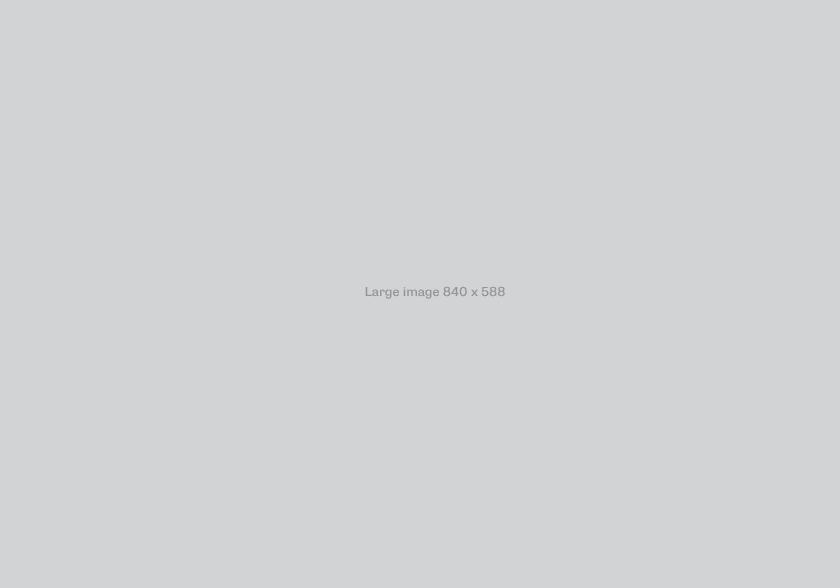
<style>
.page{position:relative;width:840px;height:588px;background:#d2d3d5}
.page>*{position:absolute;margin:0}
.t1{font:12.9px "SupriaSans-Medium";color:#939598}
</style>
<div class="page">
<p class="t1" style="left:365px;top:286px;width:140px;height:13px">Large image 840 x 588</p>
</div>
